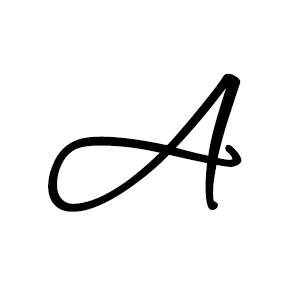
<style>
.page{position:relative;width:300px;height:300px;background:#ffffff}
.page>*{position:absolute;margin:0}
.t1{font:172px "Scriptina";color:#000000;font-weight:bold}
</style>
<div class="page">
<p class="t1" style="left:48px;top:73px;width:194px;height:139px">A</p>
</div>
